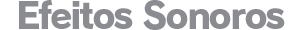
<style>
.page{position:relative;width:302px;height:30px;background:#ffffff}
.page>*{position:absolute;margin:0}
.t1{font:36px "RodinPro-EB";letter-spacing:-0.065em;color:#8b8c92}
</style>
<div class="page">
<p class="t1" style="left:19px;top:0px;width:266px;height:30px">Efeitos Sonoros</p>
</div>
